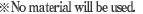
<style>
.page{position:relative;width:143px;height:14px;background:#ffffff}
.page>*{position:absolute;margin:0}
.t1{font:14px "RyuminPro-ExBold";letter-spacing:-0.08em;color:#343434;scale:0.9 1}
.t2{font:14px "TimesNewRomanPSMT";color:#343434;scale:0.9 1}
</style>
<div class="page">
<p class="t1" style="left:0px;top:1px;width:136px;height:12px"><span class="t2">※</span>No material will be used.</p>
</div>
